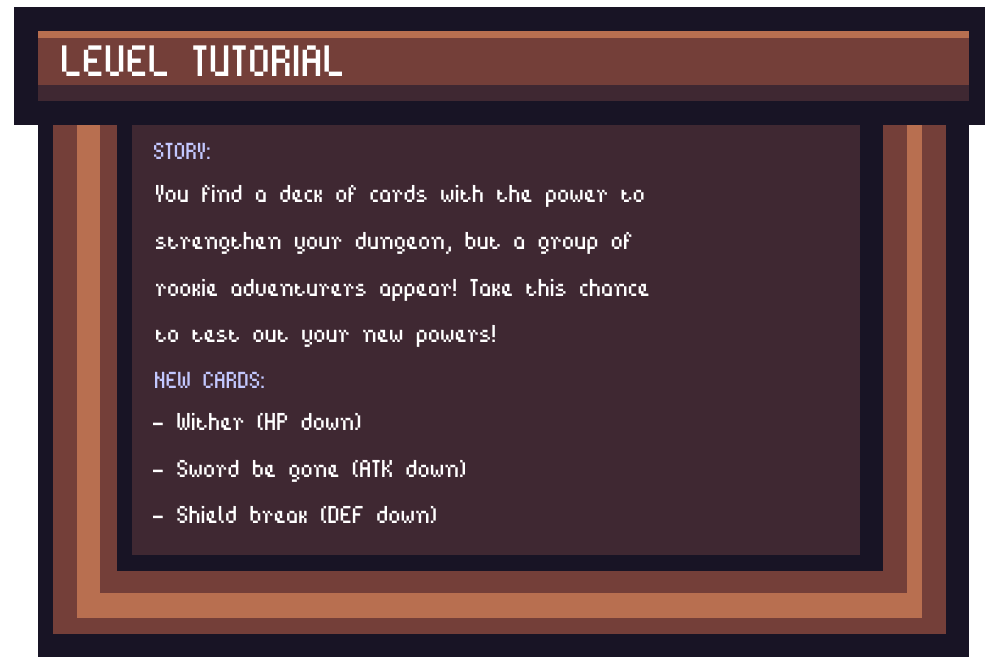
<style>
.page{position:relative;width:988px;height:665px;background:#3f2832}
.page>*{position:absolute;margin:0}
.t1{font:70px "BitPotion";color:#ffffff}
.t2{font:37px "BitPotion";color:#c3c8ff}
.t3{font:39px "BitPotion";color:#ffffff}
</style>
<div class="page">
<p class="t1" style="left:62px;top:45px;width:280px;height:31px">LEVEL TUTORIAL</p>
<p class="t2" style="left:154px;top:142px;width:56px;height:17px">STORY:</p>
<p class="t3" style="left:156px;top:184px;width:493px;height:163px">You find a deck of cards with the power to<br>strengthen your dungeon, but a group of <br>rookie adventurers appear! Take this chance<br>to test out your new powers!</p>
<p class="t2" style="left:155px;top:371px;width:109px;height:17px">NEW CARDS:</p>
<p class="t3" style="left:153px;top:412px;width:312px;height:111px">- Wither (HP down)<br>- Sword be gone (ATK down)<br>- Shield break (DEF down)</p>
</div>
